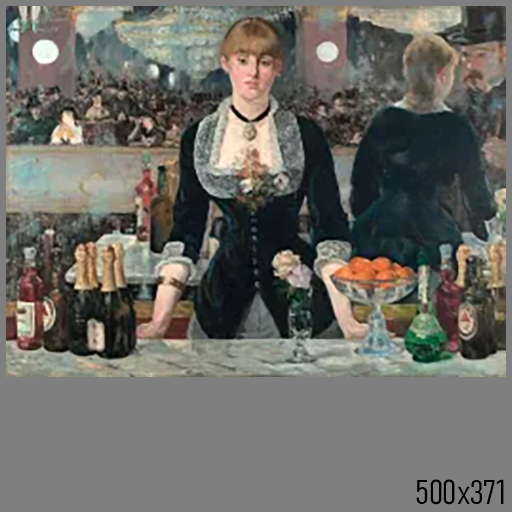
<style>
.page{position:relative;width:512px;height:512px;background:#7f7f7f}
.page>*{position:absolute;margin:0}
.t1{font:34px "Bahnschrift-LightCondensed";color:#000000}
</style>
<div class="page">
<p class="t1" style="left:416px;top:479px;width:88px;height:26px">500x371</p>
</div>
